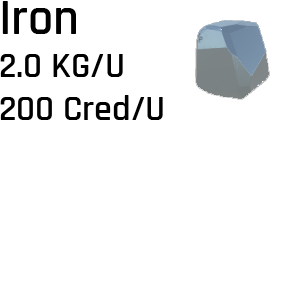
<style>
.page{position:relative;width:300px;height:283px;background:#ffffff}
.page>*{position:absolute;margin:0}
.t1{font:36px "Rajdhani-SemiBold";color:#000000}
.t2{font:50px "Rajdhani-SemiBold";color:#000000}
</style>
<div class="page">
<p class="t1" style="left:0px;top:1px;width:163px;height:119px"><span class="t2">Iron<br></span>2.0 KG/U<br>200 Cred/U</p>
</div>
